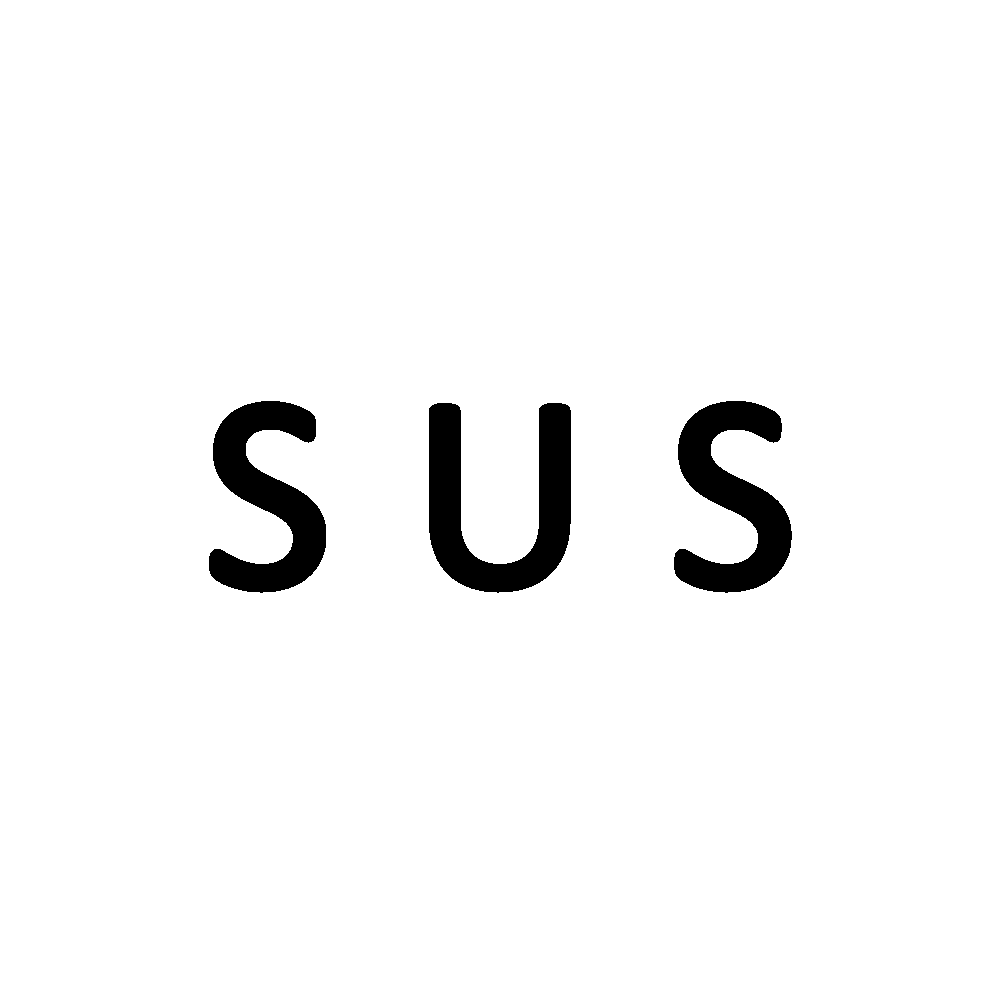
<style>
.page{position:relative;width:1000px;height:1000px;background:#ffffff}
.page>*{position:absolute;margin:0}
.t1{font:280px "Calibri";color:#000000;font-weight:bold}
</style>
<div class="page">
<p class="t1" style="left:209px;top:401px;width:583px;height:192px">S U S</p>
</div>
